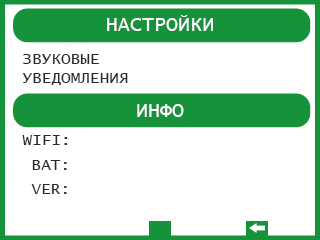
<style>
.page{position:relative;width:320px;height:240px;background:#ffffff}
.page>*{position:absolute;margin:0}
.t1{font:20px "LucidaConsole";color:#ffffff;text-transform:uppercase}
.t2{font:16px "LucidaConsole";color:#292b30;text-transform:uppercase}
</style>
<div class="page">
<p class="t1" style="left:107px;top:15px;width:106px;height:16px">настройки</p>
<p class="t2" style="left:22px;top:54px;width:106px;height:31px">звуковые уведомления</p>
<p class="t1" style="left:137px;top:104px;width:47px;height:13px">ИНФО</p>
<p class="t2" style="left:22px;top:135px;width:46px;height:10px">WiFI:</p>
<p class="t2" style="left:32px;top:160px;width:35px;height:10px">Bat:</p>
<p class="t2" style="left:31px;top:184px;width:36px;height:10px">VER:</p>
</div>
